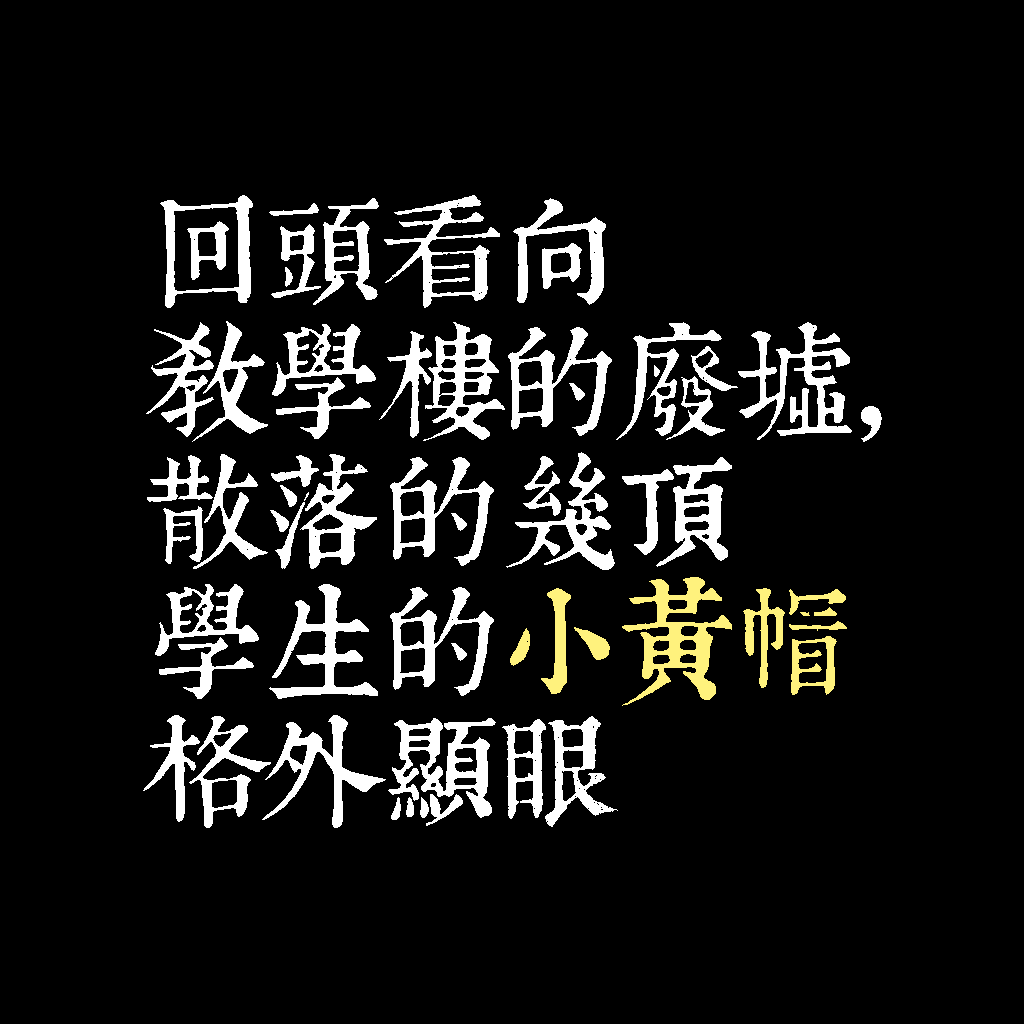
<style>
.page{position:relative;width:1024px;height:1024px;background:#000000}
.page>*{position:absolute;margin:0}
.t1{font:120px/130px "TpldKhangXiDictTrial";letter-spacing:-0.02em;color:#ffffff}
.t2{font:120px/130px "TpldKhangXiDictTrial";letter-spacing:-0.02em;color:#fff27d}
</style>
<div class="page">
<p class="t1" style="left:143px;top:195px;width:739px;height:633px">回頭看向<br>教學樓的廢墟,<br>散落的幾頂<br>學生的<span class="t2">小黃帽<br></span>格外顯眼</p>
</div>
